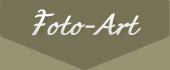
<style>
.page{position:relative;width:170px;height:70px;background:#767357}
.page>*{position:absolute;margin:0}
.t1{font:44px "Miama";color:#ededed;font-weight:bold;scale:0.95 1}
</style>
<div class="page">
<p class="t1" style="left:31px;top:9px;width:110px;height:27px">Foto-Art</p>
</div>
